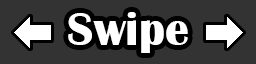
<style>
.page{position:relative;width:256px;height:64px;background:#333333}
.page>*{position:absolute;margin:0}
.t1{font:48px "BritannicBold";color:#ffffff}
</style>
<div class="page">
<p class="t1" style="left:68px;top:12px;width:120px;height:41px">Swipe</p>
</div>
